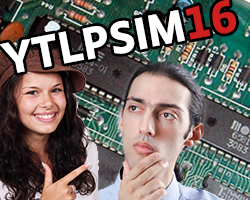
<style>
.page{position:relative;width:250px;height:200px}
.page>*{position:absolute;margin:0}
.t1{font:48px "PlusSansExtraBold-SC";letter-spacing:0.01em;color:#ffffff}
.t2{font:48px "PlusSansExtraBold-SC";letter-spacing:0.01em;color:#cd201f}
</style>
<div class="page">
<p class="t1" style="left:0px;top:0px;width:236px;height:73px;rotate:-11deg">YTLPSIM<span class="t2">16</span></p>
</div>
